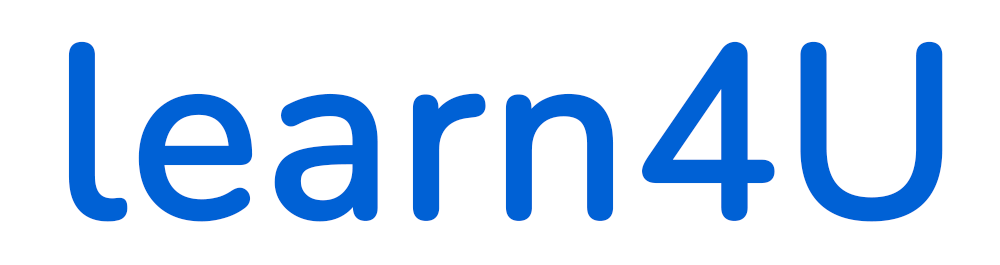
<style>
.page{position:relative;width:1000px;height:265px;background:#ffffff}
.page>*{position:absolute;margin:0}
.t1{font:240px "Nunito-Regular";color:#0061d5;font-weight:bold}
</style>
<div class="page">
<p class="t1" style="left:68px;top:41px;width:875px;height:181px">learn4U</p>
</div>
